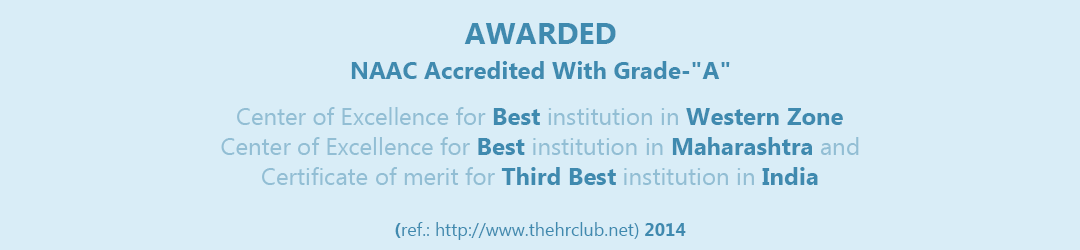
<style>
.page{position:relative;width:1080px;height:250px;background:#d9edf7}
.page>*{position:absolute;margin:0}
.t1{font:30px "MicrosoftNewTaiLue-Bold";color:#3f8aaf}
.t2{font:24px "MicrosoftNewTaiLue-Bold";color:#3f8aaf}
.t3{font:24px "MicrosoftNewTaiLue";color:#92bed4}
.t4{font:18px "MicrosoftNewTaiLue";color:#3f8aaf}
.t5{font:18px "MicrosoftNewTaiLue-Bold";color:#3f8aaf}
</style>
<div class="page">
<p class="t1" style="left:464px;top:23px;width:152px;height:21px">AWARDED</p>
<p class="t2" style="left:351px;top:61px;width:379px;height:18px">NAAC Accredited With Grade-"A"</p>
<p class="t3" style="left:237px;top:107px;width:606px;height:18px">Center of Excellence for<span class="t2"> Best</span> institution in <span class="t2">Western Zone</span></p>
<p class="t3" style="left:221px;top:137px;width:638px;height:18px">Center of Excellence for <span class="t2">Best </span>institution in <span class="t2">Maharashtra </span>and</p>
<p class="t3" style="left:262px;top:167px;width:556px;height:18px">Certificate of merit for <span class="t2">Third Best </span>institution in <span class="t2">India</span></p>
<p class="t4" style="left:395px;top:222px;width:291px;height:18px"><span class="t5">(</span>ref.: http://www.thehrclub.net)<span class="t5"> 2014</span></p>
</div>
